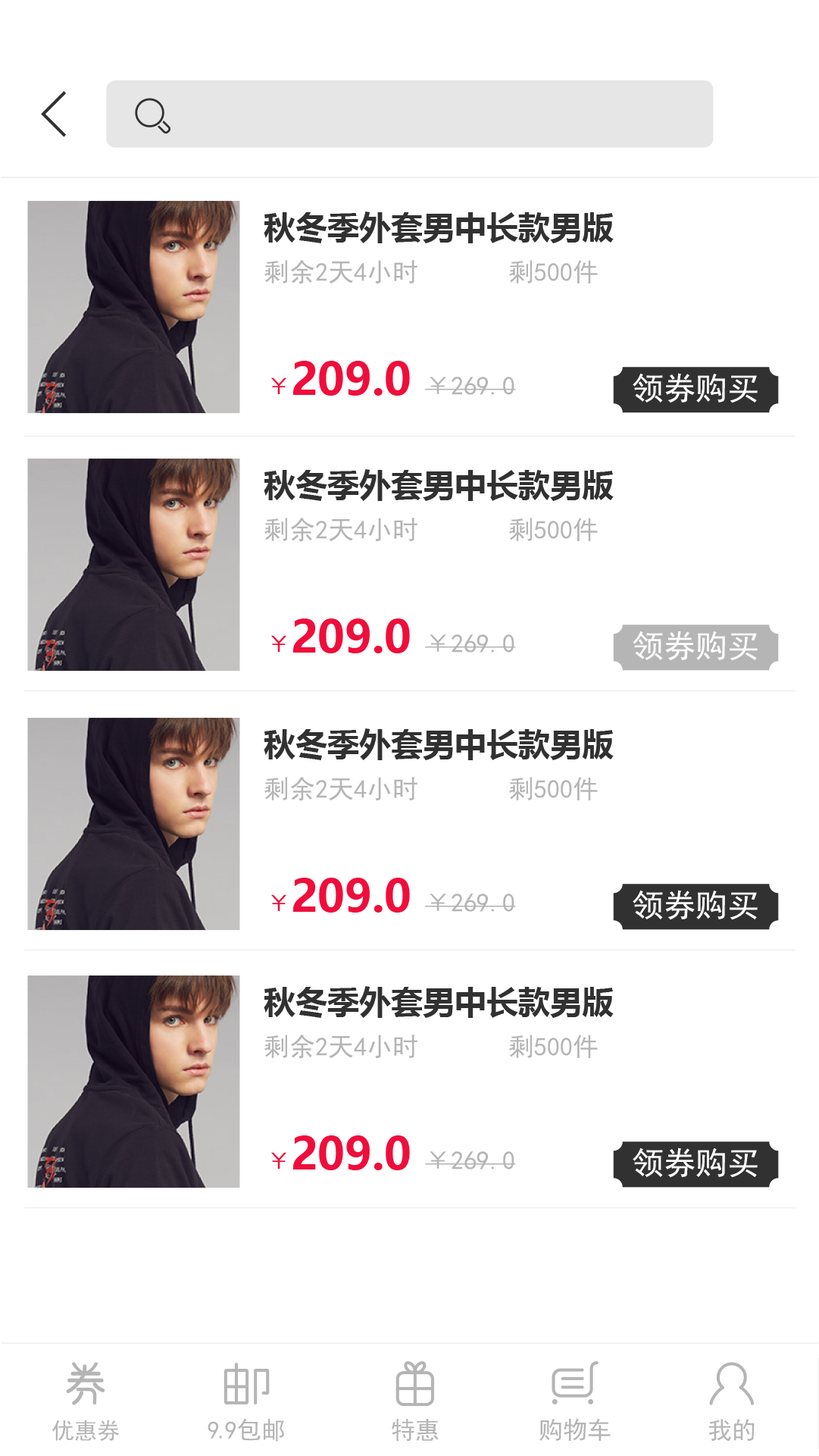
<style>
.page{position:relative;width:819px;height:1456px;background:#ffffff}
.page>*{position:absolute;margin:0}
.t1{font:31.8px "MicrosoftYaHei-Bold";color:#313131}
.t2{font:25.8px "SimHei";color:#b5b5b5}
.t3{font:24.2px "SimHei";color:#ef0e3b}
.t4{font:44px "MicrosoftYaHei-Bold";color:#ef0e3b}
.t5{font:31.8px "SimHei";color:#ffffff}
.t6{font:22.7px "SimHei";color:#b5b5b5}
.t7{font:24.2px "SimHei";color:#b5b5b5}
</style>
<div class="page">
<p class="t1" style="left:264px;top:211px;width:350px;height:32px">秋冬季外套男中长款男版</p>
<p class="t2" style="left:264px;top:260px;width:334px;height:24px">剩余2天4小时       剩500件</p>
<p class="t2" style="left:271px;top:361px;width:245px;height:35px"><span class="t3">￥</span><span class="t4">209.0 </span>￥269.0</p>
<p class="t5" style="left:633px;top:373px;width:125px;height:30px">领券购买</p>
<p class="t1" style="left:264px;top:469px;width:350px;height:32px">秋冬季外套男中长款男版</p>
<p class="t2" style="left:264px;top:518px;width:334px;height:24px">剩余2天4小时       剩500件</p>
<p class="t2" style="left:271px;top:618px;width:245px;height:35px"><span class="t3">￥</span><span class="t4">209.0 </span>￥269.0</p>
<p class="t5" style="left:633px;top:630px;width:125px;height:31px">领券购买</p>
<p class="t1" style="left:264px;top:728px;width:350px;height:32px">秋冬季外套男中长款男版</p>
<p class="t2" style="left:264px;top:777px;width:334px;height:24px">剩余2天4小时       剩500件</p>
<p class="t2" style="left:271px;top:878px;width:245px;height:34px"><span class="t3">￥</span><span class="t4">209.0 </span>￥269.0</p>
<p class="t5" style="left:633px;top:890px;width:125px;height:30px">领券购买</p>
<p class="t1" style="left:264px;top:986px;width:350px;height:32px">秋冬季外套男中长款男版</p>
<p class="t2" style="left:264px;top:1034px;width:334px;height:25px">剩余2天4小时       剩500件</p>
<p class="t2" style="left:271px;top:1135px;width:245px;height:35px"><span class="t3">￥</span><span class="t4">209.0 </span>￥269.0</p>
<p class="t5" style="left:633px;top:1147px;width:125px;height:31px">领券购买</p>
<p class="t6" style="left:52px;top:1419px;width:67px;height:22px">优惠券</p>
<p class="t7" style="left:208px;top:1418px;width:76px;height:23px">9.9包邮</p>
<p class="t7" style="left:392px;top:1419px;width:47px;height:22px">特惠</p>
<p class="t7" style="left:540px;top:1418px;width:71px;height:23px">购物车</p>
<p class="t7" style="left:709px;top:1419px;width:46px;height:22px">我的</p>
</div>
